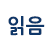
<style>
.page{position:relative;width:50px;height:50px;background:#ffffff}
.page>*{position:absolute;margin:0}
.t1{font:20px "NanumGothicBold";color:#0e3769}
</style>
<div class="page">
<p class="t1" style="left:8px;top:16px;width:37px;height:20px">읽음</p>
</div>
